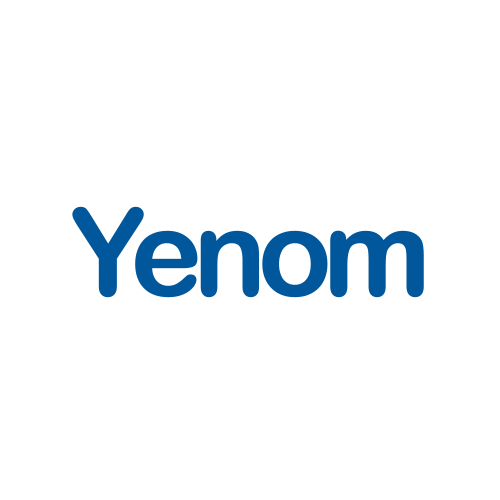
<style>
.page{position:relative;width:500px;height:500px;background:#ffffff}
.page>*{position:absolute;margin:0}
.t1{font:122.4px "ArialRoundedMTBold";letter-spacing:-0.1em;color:#01579b;font-weight:bold}
</style>
<div class="page">
<p class="t1" style="left:72px;top:206px;width:352px;height:92px">Yenom</p>
</div>
